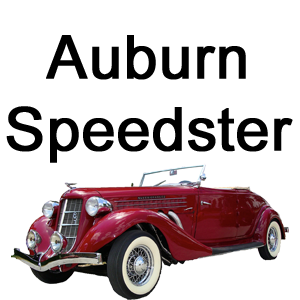
<style>
.page{position:relative;width:300px;height:300px;background:#ffffff}
.page>*{position:absolute;margin:0}
.t1{font:60px "ArialMT";color:#000000;font-weight:bold}
</style>
<div class="page">
<p class="t1" style="left:6px;top:35px;width:287px;height:128px;text-align:center">Auburn<br>Speedster</p>
</div>
